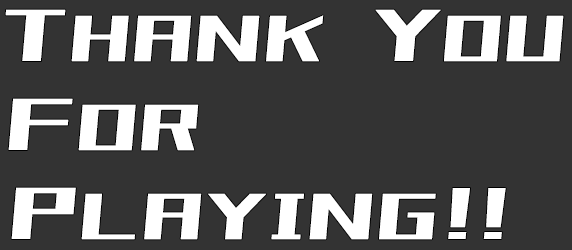
<style>
.page{position:relative;width:572px;height:250px;background:#333333}
.page>*{position:absolute;margin:0}
.t1{font:80px "851Gkktt";color:#ffffff}
.t2{font:90px "851Gkktt";color:#ffffff}
</style>
<div class="page">
<p class="t1" style="left:5px;top:9px;width:559px;height:53px"><span class="t2">T</span>HANK<span class="t2"> Y</span>OU</p>
<p class="t1" style="left:8px;top:98px;width:191px;height:53px"><span class="t2">F</span>OR</p>
<p class="t1" style="left:11px;top:187px;width:495px;height:53px"><span class="t2">P</span>LAYING<span class="t2">!!</span></p>
</div>
